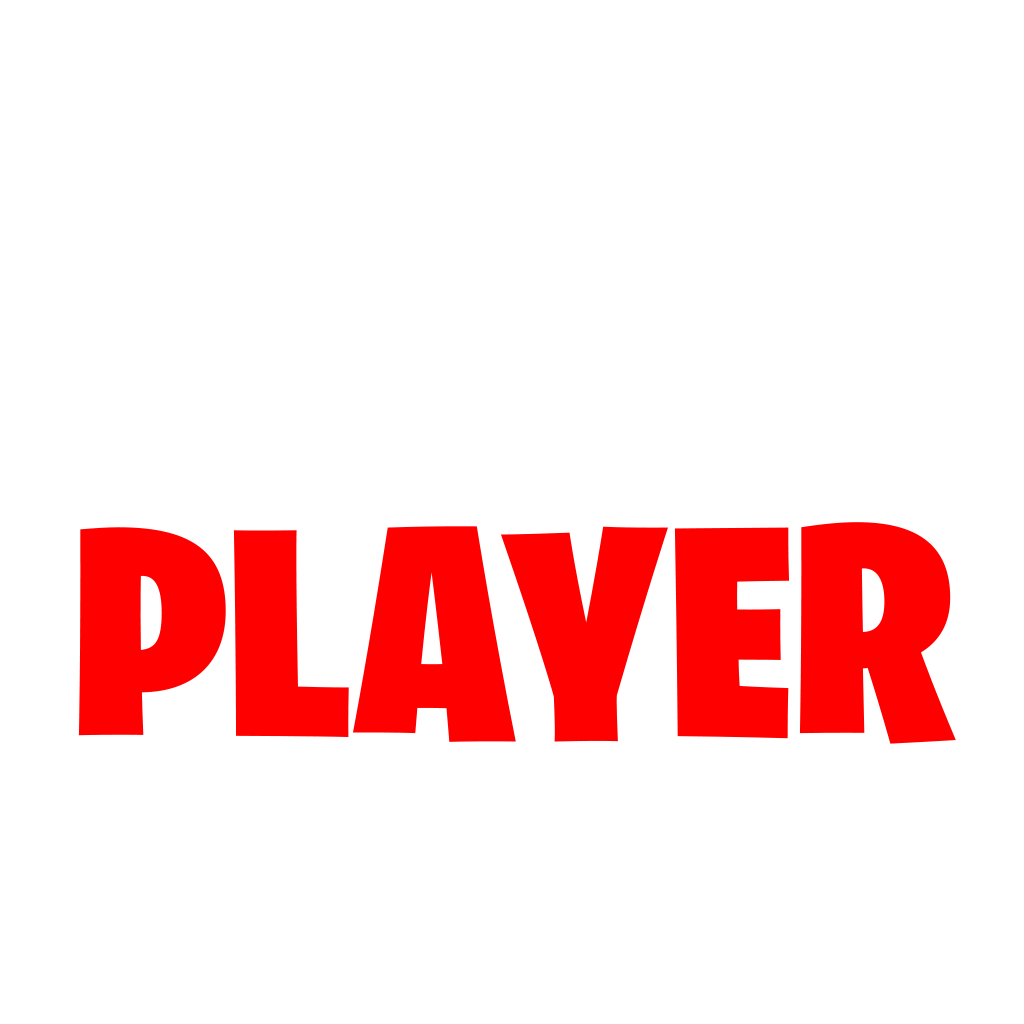
<style>
.page{position:relative;width:1024px;height:1024px;background:#ffffff}
.page>*{position:absolute;margin:0}
.t1{font:300px "BurbankBigCondensed-Black";color:#ff0000;scale:1.16 1}
</style>
<div class="page">
<p class="t1" style="left:78px;top:522px;width:878px;height:222px">PLAYER</p>
</div>
